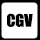
<style>
.page{position:relative;width:40px;height:40px;background:#ffffff}
.page>*{position:absolute;margin:0}
.t1{font:16px "Impact";color:#000000}
</style>
<div class="page">
<p class="t1" style="left:7px;top:13px;width:26px;height:14px">CGV</p>
</div>
